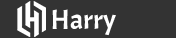
<style>
.page{position:relative;width:176px;height:38px;background:#333333}
.page>*{position:absolute;margin:0}
.t1{font:48px "Acme-Regular";color:#ffffff}
</style>
<div class="page">
<p class="t1" style="left:52px;top:9px;width:64px;height:27px">Harry</p>
</div>
